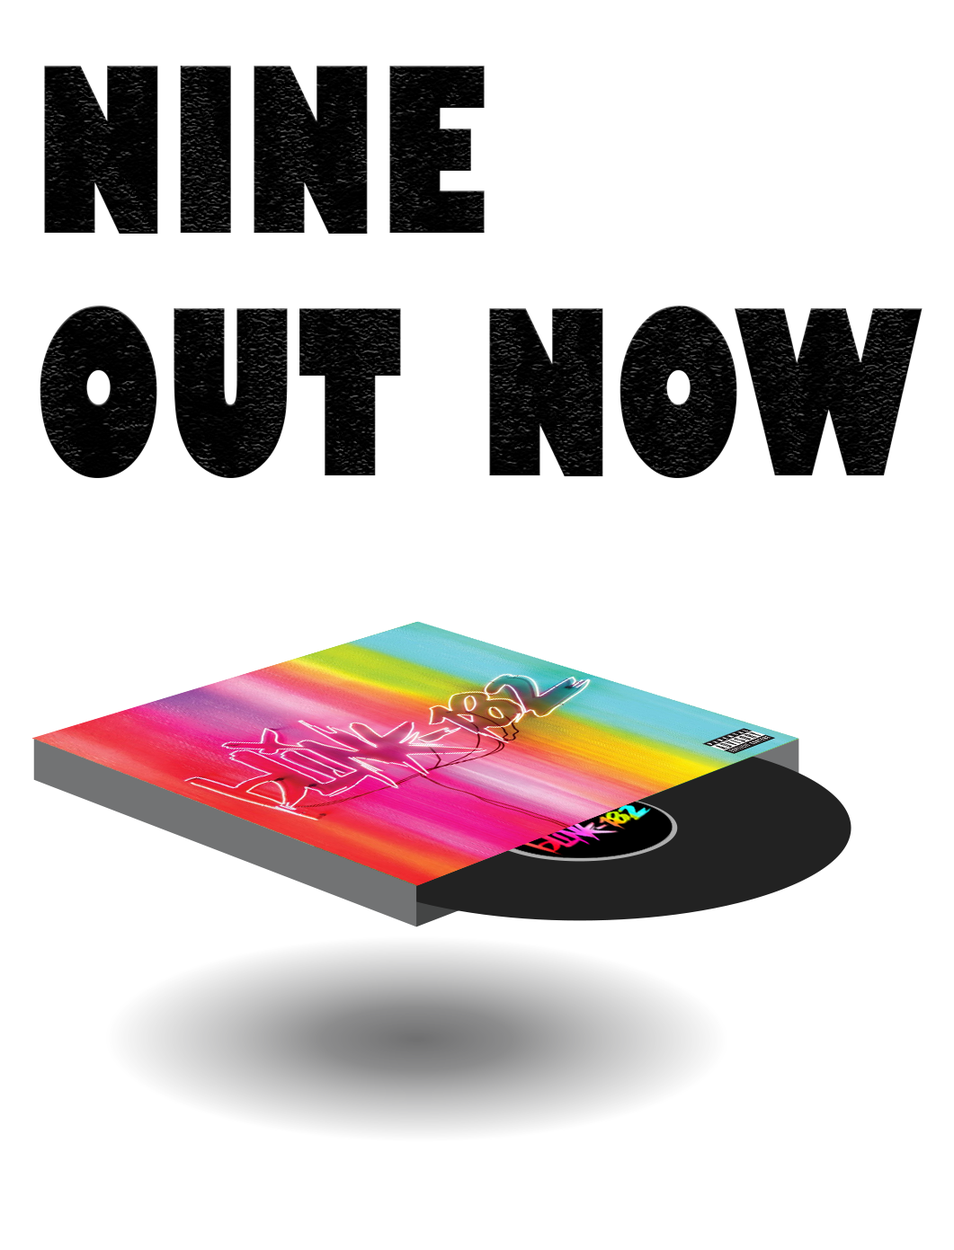
<style>
.page{position:relative;width:954px;height:1250px;background:#ffffff}
.page>*{position:absolute;margin:0}
.t1{font:224.7px/242.7px "GillSans-UltraBoldCondensed";color:#000000}
</style>
<div class="page">
<p class="t1" style="left:40px;top:66px;width:882px;height:412px">NINE<br>OUT NOW</p>
</div>
